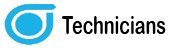
<style>
.page{position:relative;width:171px;height:49px;background:#ffffff}
.page>*{position:absolute;margin:0}
.t1{font:19px "ArialRoundedMTBold";color:#000000;scale:0.71 1}
</style>
<div class="page">
<p class="t1" style="left:62px;top:16px;width:104px;height:18px">Technicians</p>
</div>
